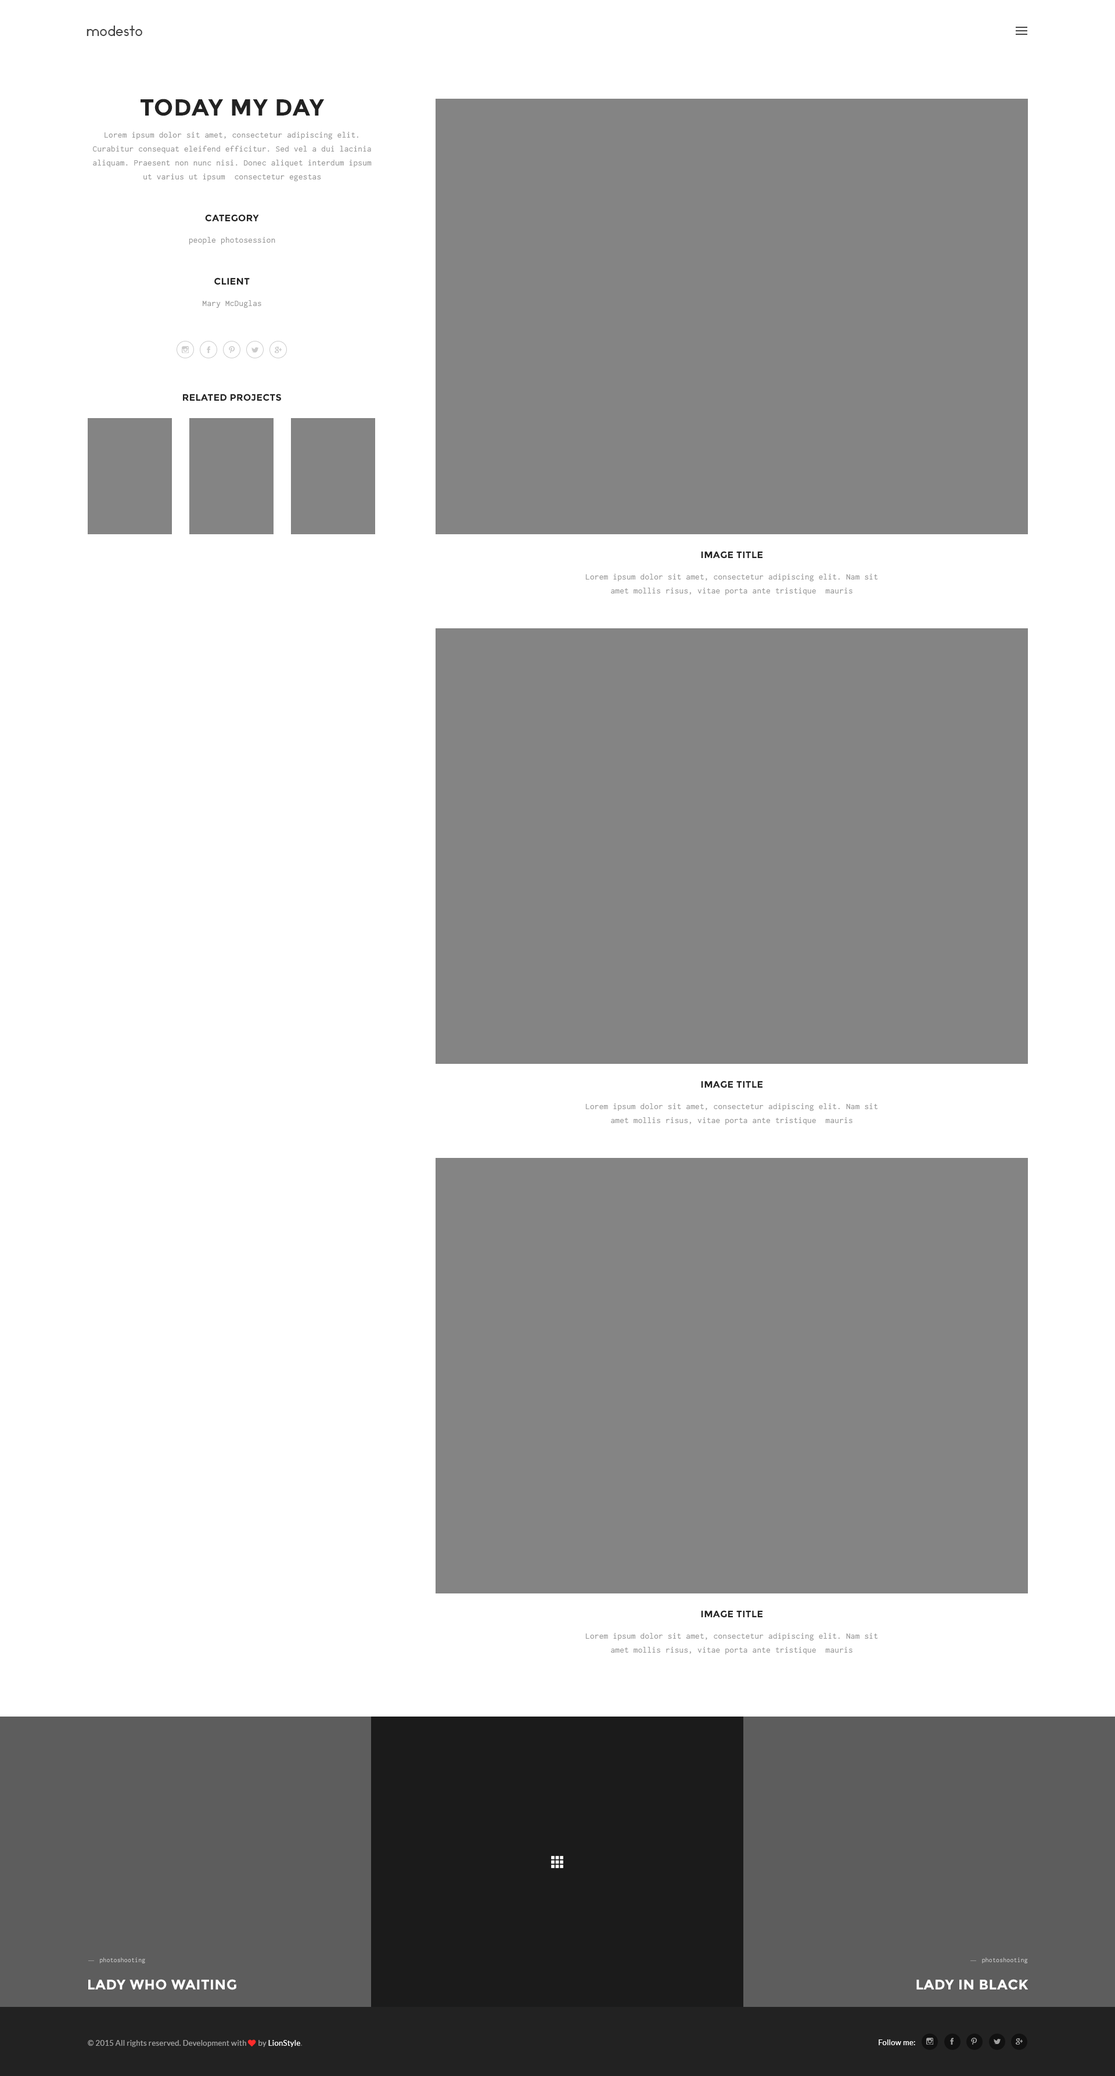
<style>
.page{position:relative;width:1115px;height:2076px;background:#ffffff}
.page>*{position:absolute;margin:0}
.t1{font:13.9px "Ikaros";letter-spacing:0.025em;color:#444444}
.t2{font:23.2px "Montserrat-Bold";letter-spacing:0.025em;color:#222222;text-transform:uppercase}
.t3{font:8.7px/13.9px "Inconsolata";letter-spacing:0.025em;color:#989898}
.t4{font:9.3px "Montserrat-Bold";letter-spacing:0.025em;color:#222222;text-transform:uppercase}
.t5{font:8.7px "Inconsolata";letter-spacing:0.025em;color:#989898}
.t6{font:7px "Inconsolata";letter-spacing:0.025em;scale:0.97 1}
.t7{font:13.9px "Montserrat-Bold";letter-spacing:0.025em;color:#ffffff;text-transform:uppercase}
.t8{font:7.5px "Lato-Regular";letter-spacing:0.025em;color:#a1a1a1}
.t9{font:7.5px "FontAwesome";letter-spacing:0.025em;color:#fe2b2b}
.t10{font:7.5px "Lato-Regular";letter-spacing:0.025em;color:#ffffff}
.t11{font:7.5px "Lato-Regular";letter-spacing:0.025em;color:#696969}
.t12{font:7.5px "Lato-Regular";letter-spacing:0.025em;color:#fefefe}
</style>
<div class="page">
<p class="t1" style="left:87px;top:26px;width:55px;height:10px">modesto</p>
<p class="t2" style="left:141px;top:99px;width:184px;height:17px">today my day</p>
<p class="t3" style="left:93px;top:132px;width:279px;height:49px;text-align:center">Lorem ipsum dolor sit amet, consectetur adipiscing elit. Curabitur consequat eleifend efficitur. Sed vel a dui lacinia aliquam. Praesent non nunc nisi. Donec aliquet interdum ipsum ut varius ut ipsum  consectetur egestas</p>
<p class="t4" style="left:205px;top:214px;width:54px;height:8px">category</p>
<p class="t5" style="left:189px;top:237px;width:86px;height:7px">people photosession</p>
<p class="t4" style="left:214px;top:278px;width:36px;height:7px">client</p>
<p class="t5" style="left:203px;top:300px;width:58px;height:8px">Mary McDuglas</p>
<p class="t4" style="left:183px;top:394px;width:98px;height:7px">related projects</p>
<p class="t4" style="left:701px;top:551px;width:61px;height:8px">image title</p>
<p class="t3" style="left:585px;top:574px;width:293px;height:21px;text-align:center">Lorem ipsum dolor sit amet, consectetur adipiscing elit. Nam sit amet mollis risus, vitae porta ante tristique  mauris</p>
<p class="t4" style="left:701px;top:1081px;width:61px;height:7px">image title</p>
<p class="t3" style="left:585px;top:1103px;width:293px;height:22px;text-align:center">Lorem ipsum dolor sit amet, consectetur adipiscing elit. Nam sit amet mollis risus, vitae porta ante tristique  mauris</p>
<p class="t4" style="left:701px;top:1610px;width:61px;height:8px">image title</p>
<p class="t3" style="left:585px;top:1633px;width:293px;height:21px;text-align:center">Lorem ipsum dolor sit amet, consectetur adipiscing elit. Nam sit amet mollis risus, vitae porta ante tristique  mauris</p>
<p class="t6" style="left:100px;top:1957px;width:45px;height:6px">photoshooting</p>
<p class="t6" style="left:982px;top:1957px;width:46px;height:6px">photoshooting</p>
<p class="t7" style="left:88px;top:1979px;width:148px;height:11px">LADY WHO WAITING</p>
<p class="t7" style="left:916px;top:1979px;width:112px;height:11px">LADY in black</p>
<p class="t8" style="left:88px;top:2039px;width:214px;height:8px">© 2015 All rights reserved. Development with <span class="t9">♥ </span>by <span class="t10">LionStyle</span><span class="t11">.</span></p>
<p class="t12" style="left:879px;top:2039px;width:36px;height:6px">Follow me:</p>
</div>
